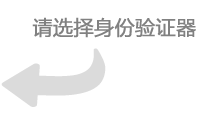
<style>
.page{position:relative;width:200px;height:124px;background:#ffffff}
.page>*{position:absolute;margin:0}
.t1{font:20px "MicrosoftYaHei";color:#818181;font-weight:bold}
</style>
<div class="page">
<p class="t1" style="left:32px;top:17px;width:164px;height:21px">请选择身份验证器</p>
</div>
